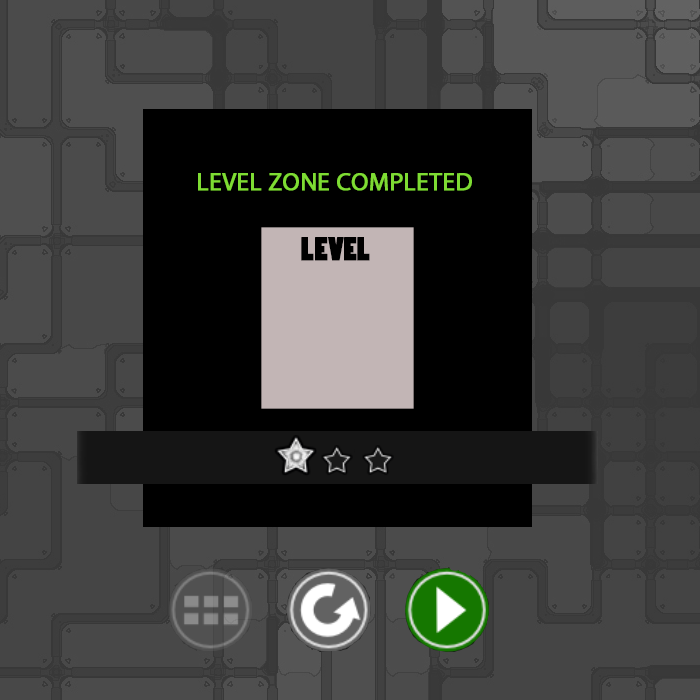
<style>
.page{position:relative;width:700px;height:700px;background:#000000}
.page>*{position:absolute;margin:0}
.t1{font:25px "MyriadPro-Regular";color:#7edc33;font-weight:bold}
.t2{font:30px "PoplarStd";color:#000000;font-weight:bold}
</style>
<div class="page">
<p class="t1" style="left:198px;top:173px;width:274px;height:18px">LEVEL ZONE COMPLETED</p>
<p class="t2" style="left:301px;top:237px;width:69px;height:24px">LEVEL</p>
</div>
